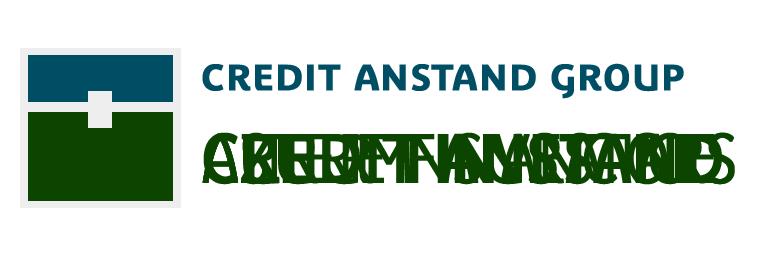
<style>
.page{position:relative;width:768px;height:256px;background:#ffffff}
.page>*{position:absolute;margin:0}
.t1{font:36px "ParisinePlusStd-Bold";letter-spacing:0.025em;color:#004e64;text-transform:uppercase;font-weight:bold}
.t2{font:68px "ParisinePlusStdClair-Bold";letter-spacing:-0.01em;color:#0b4500;text-transform:uppercase;font-weight:bold;scale:0.88 1}
.t3{font:68px "ParisinePlusStd-Regular";letter-spacing:0.01em;color:#0b4500;text-transform:uppercase;font-weight:bold;scale:0.88 1}
</style>
<div class="page">
<p class="t1" style="left:202px;top:63px;width:482px;height:36px">Credit Anstand Group</p>
<p class="t2" style="left:202px;top:132px;width:533px;height:53px">Aurum Investors</p>
<p class="t2" style="left:202px;top:132px;width:532px;height:53px">Azure Financials</p>
<p class="t2" style="left:202px;top:132px;width:513px;height:53px">Aster Insurance</p>
<p class="t3" style="left:203px;top:132px;width:519px;height:53px">Credit Anstand</p>
</div>
